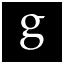
<style>
.page{position:relative;width:64px;height:64px;background:#000000}
.page>*{position:absolute;margin:0}
.t1{font:48px "PalatinoLinotype-Roman";color:#ffffff}
</style>
<div class="page">
<p class="t1" style="left:20px;top:14px;width:25px;height:36px">g</p>
</div>
